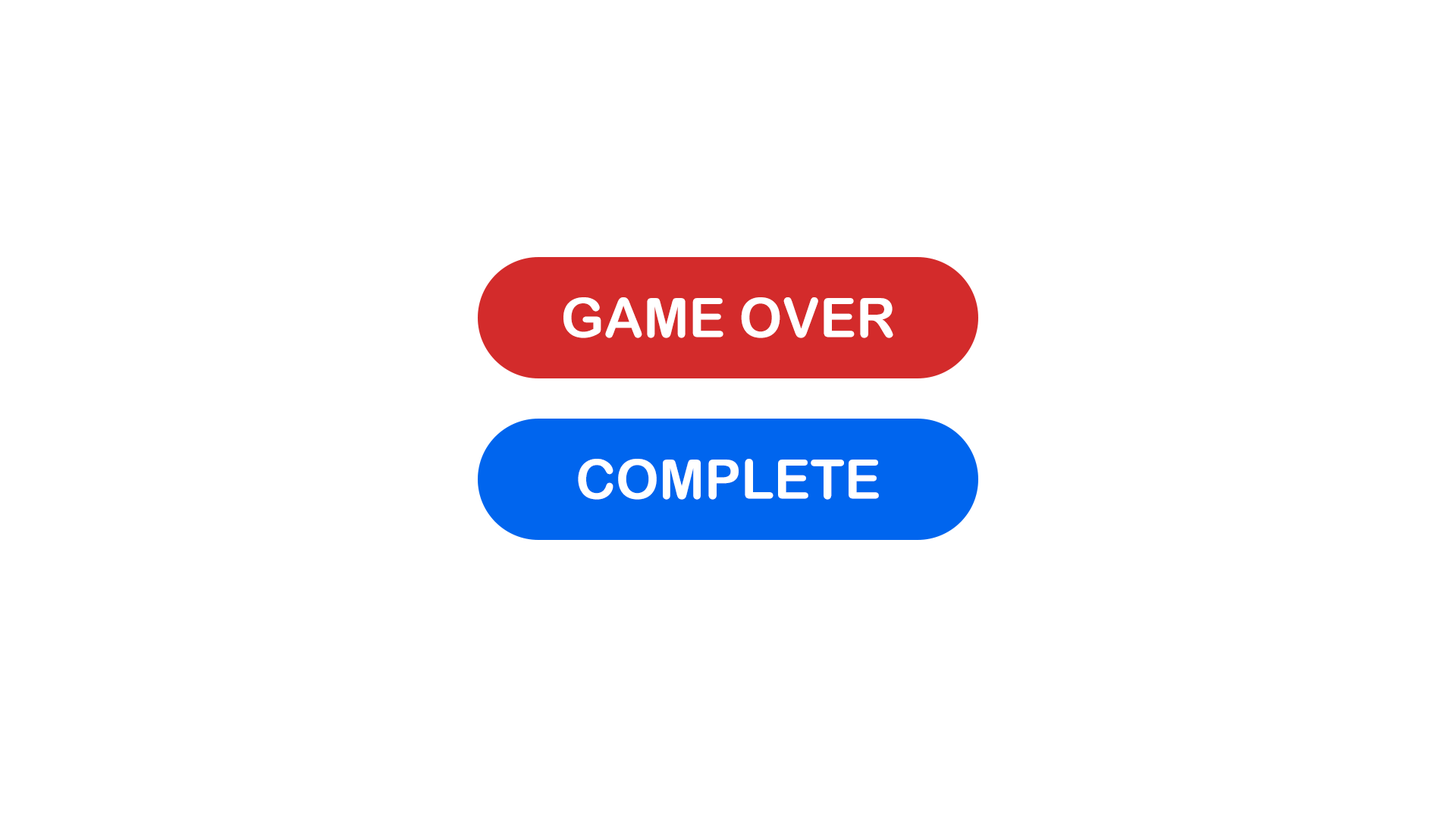
<style>
.page{position:relative;width:1456px;height:819px;background:#ffffff}
.page>*{position:absolute;margin:0}
.t1{font:54.6px "ArialRoundedMTBold";color:#ffffff}
</style>
<div class="page">
<p class="t1" style="left:563px;top:297px;width:330px;height:41px">GAME OVER</p>
<p class="t1" style="left:578px;top:459px;width:301px;height:41px">COMPLETE</p>
</div>
